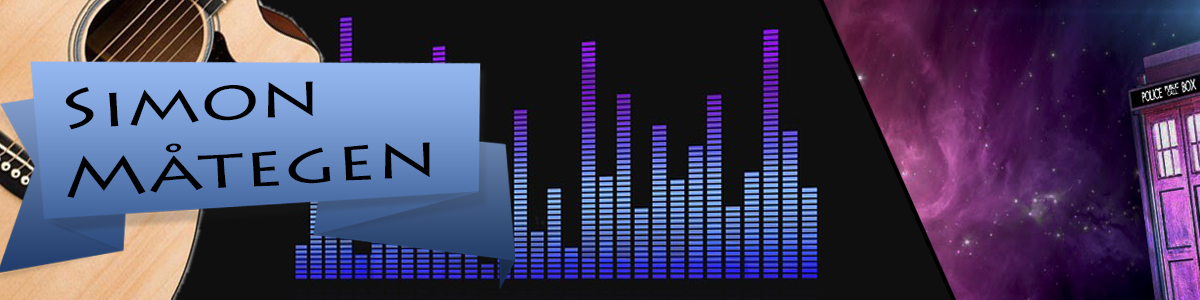
<style>
.page{position:relative;width:1200px;height:300px;background:#0f0f0f}
.page>*{position:absolute;margin:0}
.t1{font:56.3px "LithosPro-Regular";color:#000000;scale:1.38 1}
</style>
<div class="page">
<p class="t1" style="left:65px;top:81px;width:365px;height:117px;rotate:-3deg">Simon<br>Måtegen</p>
</div>
